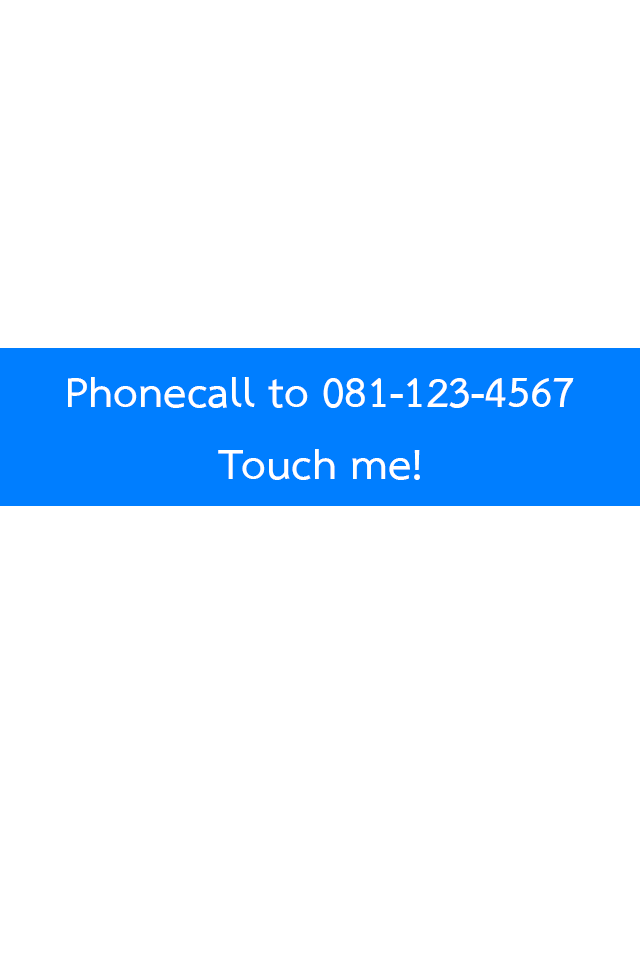
<style>
.page{position:relative;width:640px;height:960px;background:#ffffff}
.page>*{position:absolute;margin:0}
.t1{font:59.8px "THSarabunPSK-Bold";color:#ffffff}
</style>
<div class="page">
<p class="t1" style="left:68px;top:377px;width:506px;height:103px;text-align:center">Phonecall to 081-123-4567<br>Touch me!</p>
</div>
